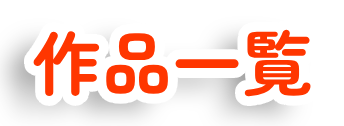
<style>
.page{position:relative;width:344px;height:126px;background:#ffffff}
.page>*{position:absolute;margin:0}
.t1{font:70px "ZenMaruGothic-Bold";color:#ff3600}
</style>
<div class="page">
<p class="t1" style="left:33px;top:29px;width:278px;height:68px">作品一覧</p>
</div>
